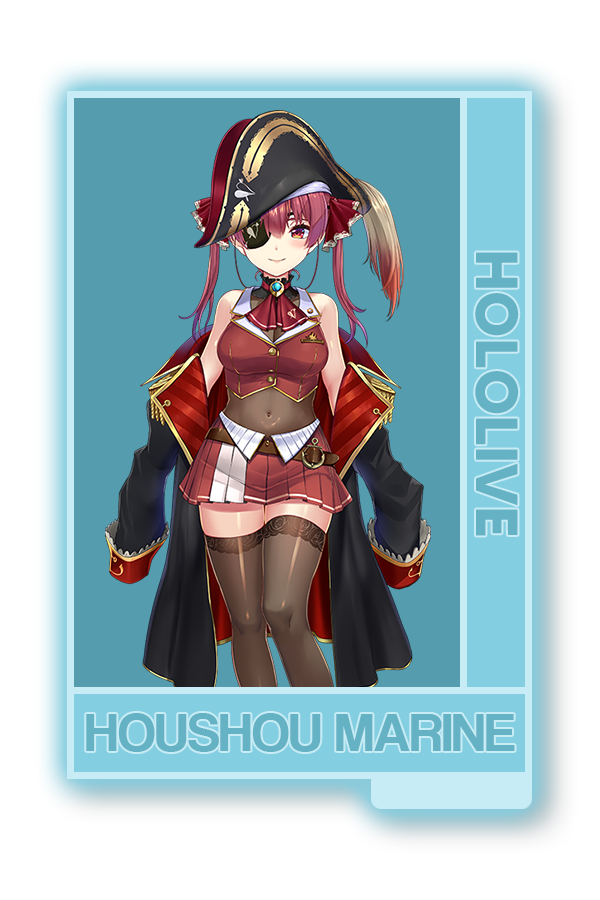
<style>
.page{position:relative;width:600px;height:900px;background:#ffffff}
.page>*{position:absolute;margin:0}
.t1{font:59.2px "MADETOMMY-Bold";color:#66b2c5}
.t2{font:55.6px "CoolveticaRg-Regular";color:#66b2c5}
</style>
<div class="page">
<p class="t1" style="left:475px;top:252px;width:44px;height:284px;rotate:90deg">HOLOLIVE</p>
<p class="t2" style="left:86px;top:713px;width:429px;height:39px">HOUSHOU MARINE</p>
</div>
